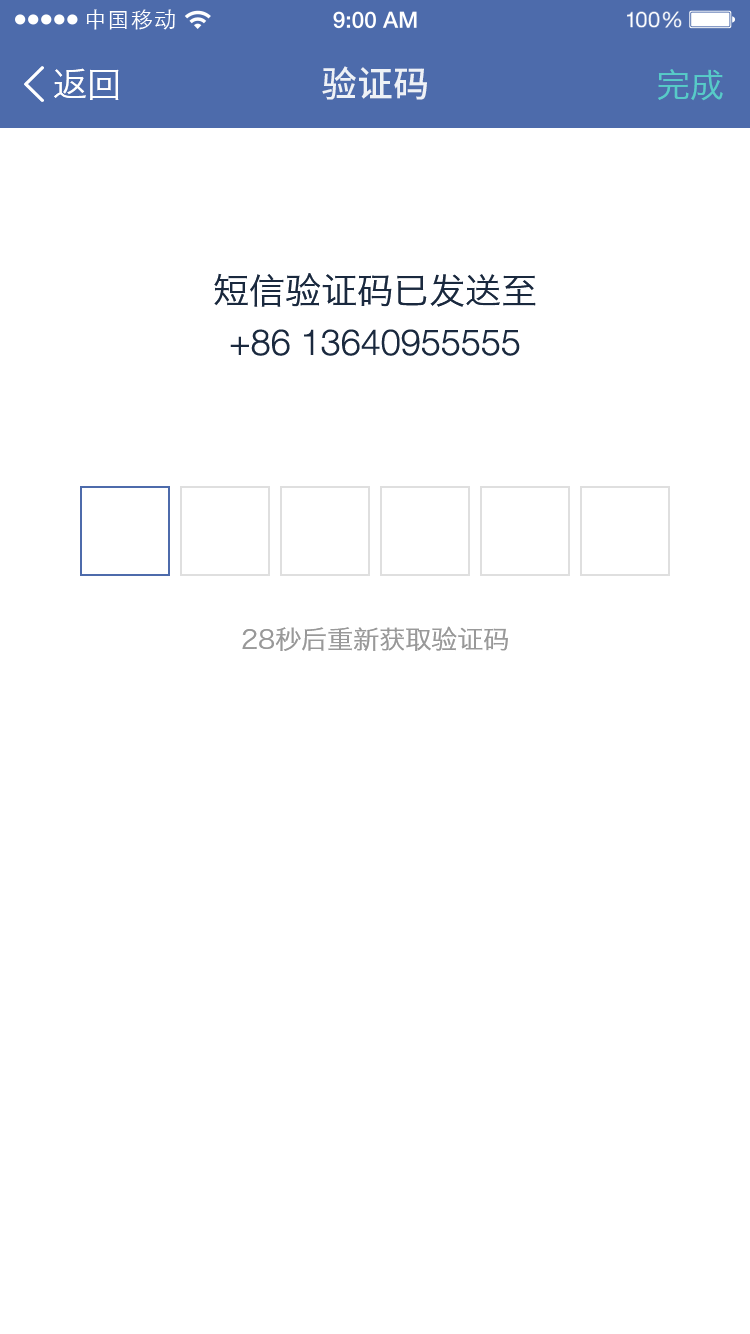
<style>
.page{position:relative;width:750px;height:1334px;background:#ffffff}
.page>*{position:absolute;margin:0}
.t1{font:21.9px "STXihei";letter-spacing:0.04em;color:#ffffff}
.t2{font:34px "HiraginoSansGB-W3";color:#ffffff}
.t3{font:36px "NotoSansHans-Medium";color:#eef1f6}
.t4{font:34px "HiraginoSansGB-W3";color:#57cbc8}
.t5{font:36px "HiraginoSansGB-W3";color:#1a293e}
.t6{font:36px "Helvetica45light";color:#1a293e}
.t7{font:26px "HiraginoSansGB-W3";color:#999999}
</style>
<div class="page">
<p class="t1" style="left:86px;top:9px;width:89px;height:21px">中国移动</p>
<p class="t2" style="left:54px;top:68px;width:65px;height:32px">返回</p>
<p class="t3" style="left:322px;top:66px;width:105px;height:34px">验证码</p>
<p class="t4" style="left:658px;top:69px;width:65px;height:32px">完成</p>
<p class="t5" style="left:214px;top:273px;width:322px;height:34px">短信验证码已发送至</p>
<p class="t6" style="left:230px;top:329px;width:290px;height:27px">+86 13640955555</p>
<p class="t7" style="left:242px;top:626px;width:266px;height:25px">28秒后重新获取验证码</p>
</div>
